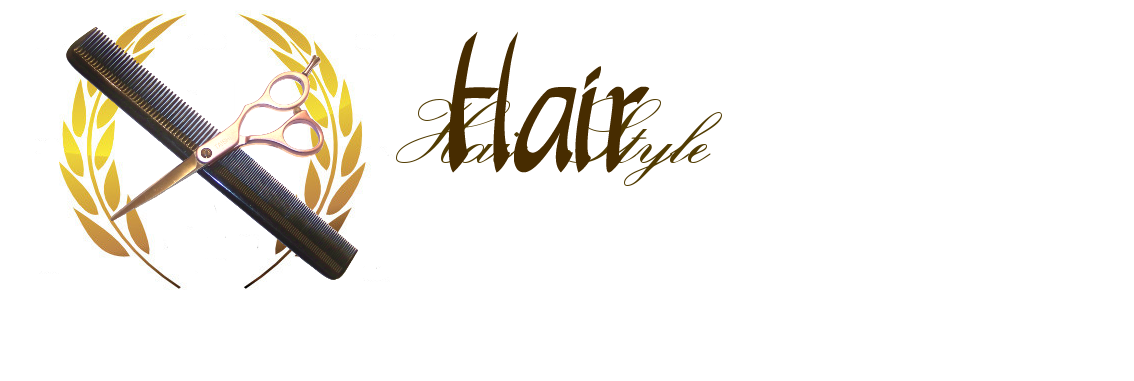
<style>
.page{position:relative;width:1134px;height:381px;background:#ffffff}
.page>*{position:absolute;margin:0}
.t1{font:175.4px "Apantasia";color:#472c00;font-style:italic;scale:0.67 1}
</style>
<div class="page">
<p class="t1" style="left:448px;top:31px;width:202px;height:142px">Hair Style</p>
</div>
